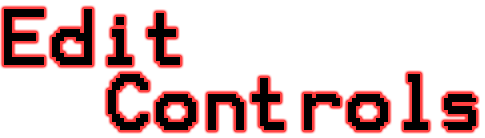
<style>
.page{position:relative;width:485px;height:138px;background:#ffffff}
.page>*{position:absolute;margin:0}
.t1{font:64px "Terminal";color:#000000}
</style>
<div class="page">
<p class="t1" style="left:4px;top:9px;width:176px;height:56px">Edit</p>
<p class="t1" style="left:108px;top:74px;width:368px;height:56px">Controls</p>
</div>
